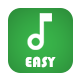
<style>
.page{position:relative;width:80px;height:80px;background:#ffffff}
.page>*{position:absolute;margin:0}
.t1{font:15px "Bauhaus93";color:#ffffff}
</style>
<div class="page">
<p class="t1" style="left:25px;top:56px;width:31px;height:12px">EASY</p>
</div>
